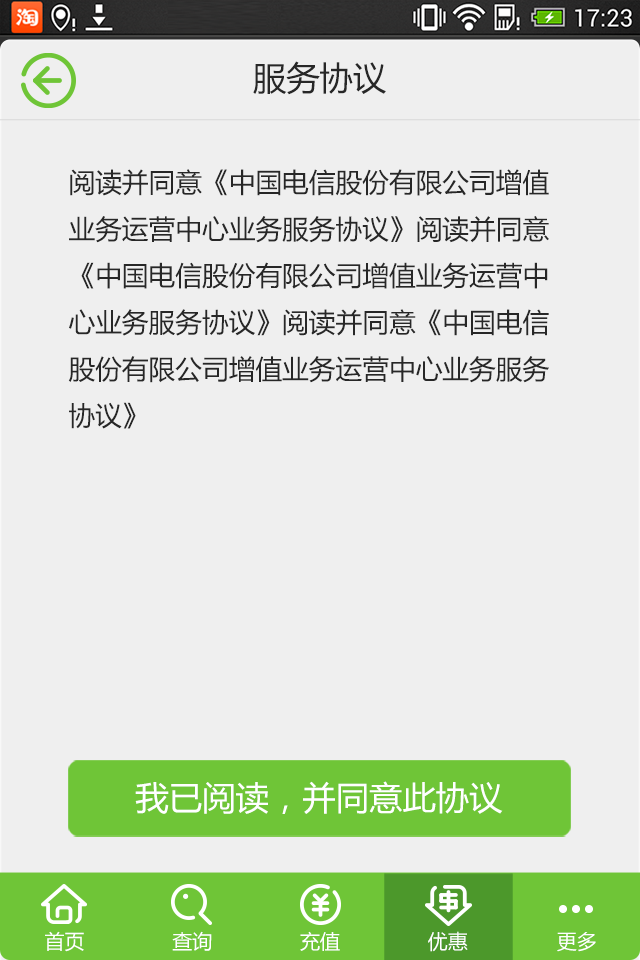
<style>
.page{position:relative;width:640px;height:960px;background:#efefef}
.page>*{position:absolute;margin:0}
.t1{font:33.3px "MicrosoftYaHei";color:#272727}
.t2{font:26.7px/46.7px "MicrosoftYaHei";color:#272727}
.t3{font:33.3px "MicrosoftYaHei";color:#ffffff}
.t4{font:20px "MicrosoftYaHei";color:#ffffff}
</style>
<div class="page">
<p class="t1" style="left:253px;top:61px;width:133px;height:34px">服务协议</p>
<p class="t2" style="left:68px;top:169px;width:481px;height:260px">阅读并同意《中国电信股份有限公司增值业务运营中心业务服务协议》阅读并同意《中国电信股份有限公司增值业务运营中心业务服务协议》阅读并同意《中国电信股份有限公司增值业务运营中心业务服务协议》</p>
<p class="t3" style="left:135px;top:781px;width:368px;height:33px">我已阅读，并同意此协议</p>
<p class="t4" style="left:45px;top:931px;width:39px;height:21px">首页</p>
<p class="t4" style="left:172px;top:931px;width:40px;height:20px">查询</p>
<p class="t4" style="left:300px;top:931px;width:40px;height:20px">充值</p>
<p class="t4" style="left:428px;top:931px;width:40px;height:21px">优惠</p>
<p class="t4" style="left:557px;top:932px;width:39px;height:20px">更多</p>
</div>
